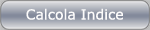
<style>
.page{position:relative;width:150px;height:30px}
.page>*{position:absolute;margin:0}
.t1{font:14px "Verdana";color:#fcfbfb}
.t2{font:8.4px "BrushScriptMT";color:#595959}
</style>
<div class="page">
<p class="t1" style="left:26px;top:8px;width:97px;height:12px"><span class="t2"><br></span>Calcola Indice</p>
</div>
